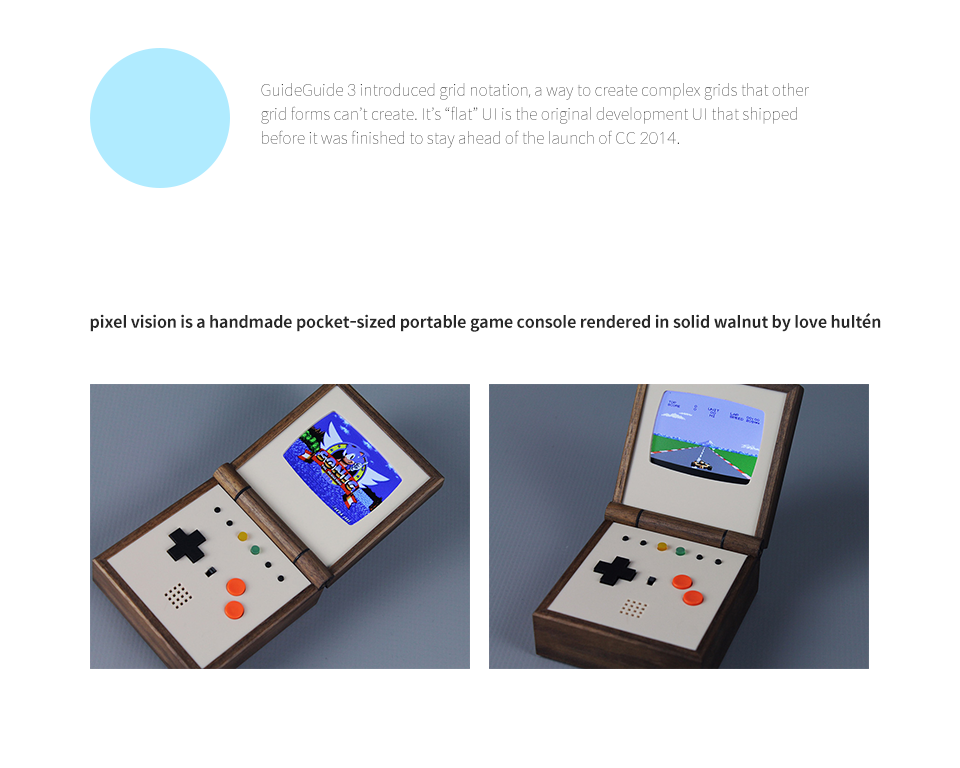
<style>
.page{position:relative;width:960px;height:768px;background:#ffffff}
.page>*{position:absolute;margin:0}
.t1{font:16px "SpoqaHanSans-Thin";letter-spacing:-0.01em;color:#282828}
.t2{font:16px "SpoqaHanSans-Bold";letter-spacing:-0.01em;color:#282828}
</style>
<div class="page">
<p class="t1" style="left:261px;top:83px;width:548px;height:65px">GuideGuide 3 introduced grid notation, a way to create complex grids that other grid forms can’t create. It’s “flat” UI is the original development UI that shipped before it was finished to stay ahead of the launch of CC 2014.</p>
<p class="t2" style="left:90px;top:313px;width:791px;height:19px">pixel vision is a handmade pocket-sized portable game console rendered in solid walnut by love hultén</p>
</div>
